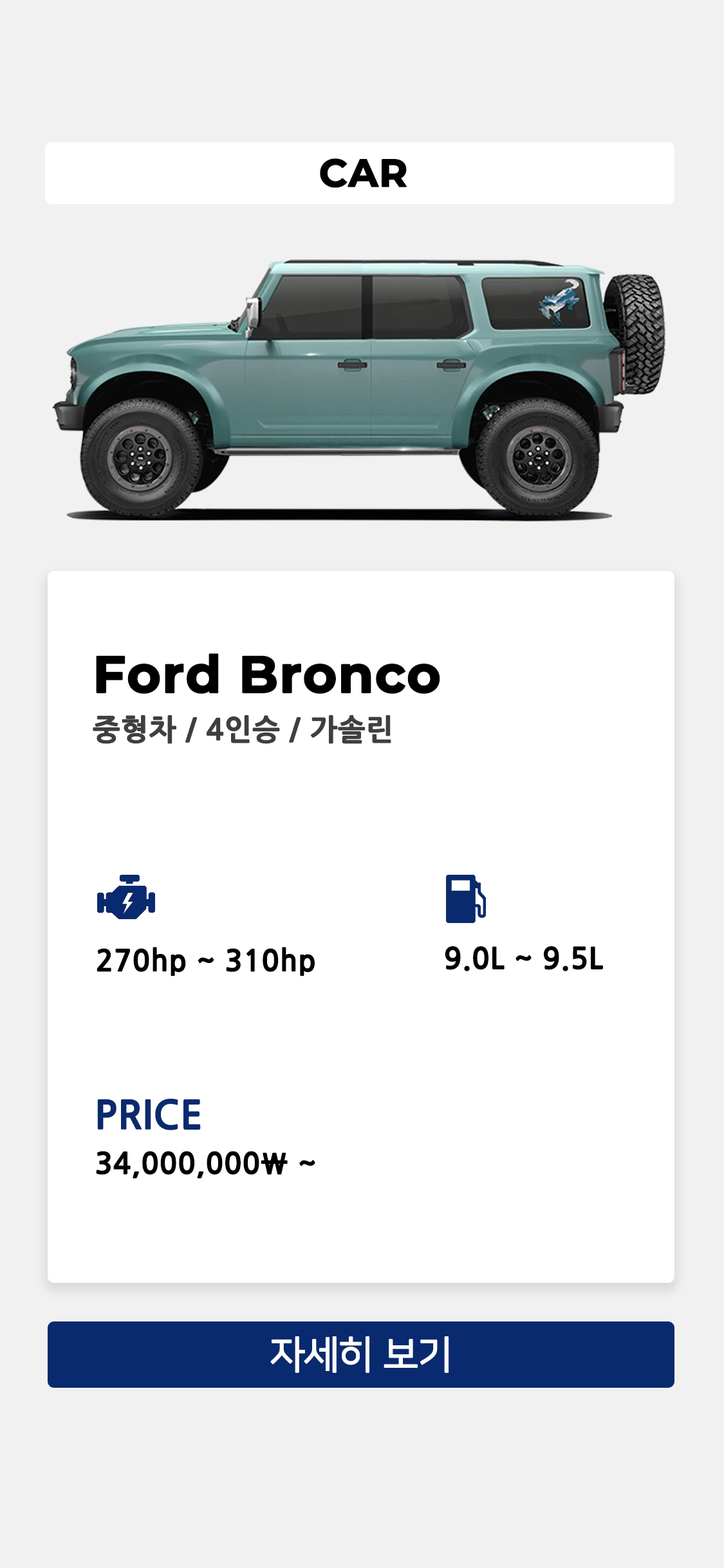
<style>
.page{position:relative;width:724px;height:1568px;background:#f1f1f1}
.page>*{position:absolute;margin:0}
.t1{font:38.6px "Montserrat-Bold";color:#000000;font-weight:bold}
.t2{font:51.5px "Montserrat-Bold";color:#000000;font-weight:bold}
.t3{font:29px "NanumGothicBold";color:#3f3f3f;font-weight:bold}
.t4{font:29px "NanumGothicBold";color:#000000;font-weight:bold}
.t5{font:38.6px "NanumGothicBold";color:#092a6e;font-weight:bold}
.t6{font:38.6px "NanumSquare_acR";color:#ffffff;font-weight:bold}
</style>
<div class="page">
<p class="t1" style="left:320px;top:158px;width:87px;height:30px">CAR</p>
<p class="t2" style="left:96px;top:653px;width:344px;height:41px">Ford Bronco</p>
<p class="t3" style="left:93px;top:714px;width:298px;height:30px">중형차 / 4인승 / 가솔린</p>
<p class="t4" style="left:97px;top:947px;width:218px;height:29px">270hp ~ 310hp</p>
<p class="t4" style="left:445px;top:946px;width:158px;height:25px">9.0L ~ 9.5L</p>
<p class="t5" style="left:97px;top:1099px;width:104px;height:31px">PRICE</p>
<p class="t4" style="left:96px;top:1151px;width:219px;height:28px">34,000,000￦ ~</p>
<p class="t6" style="left:270px;top:1336px;width:179px;height:37px">자세히 보기</p>
</div>
